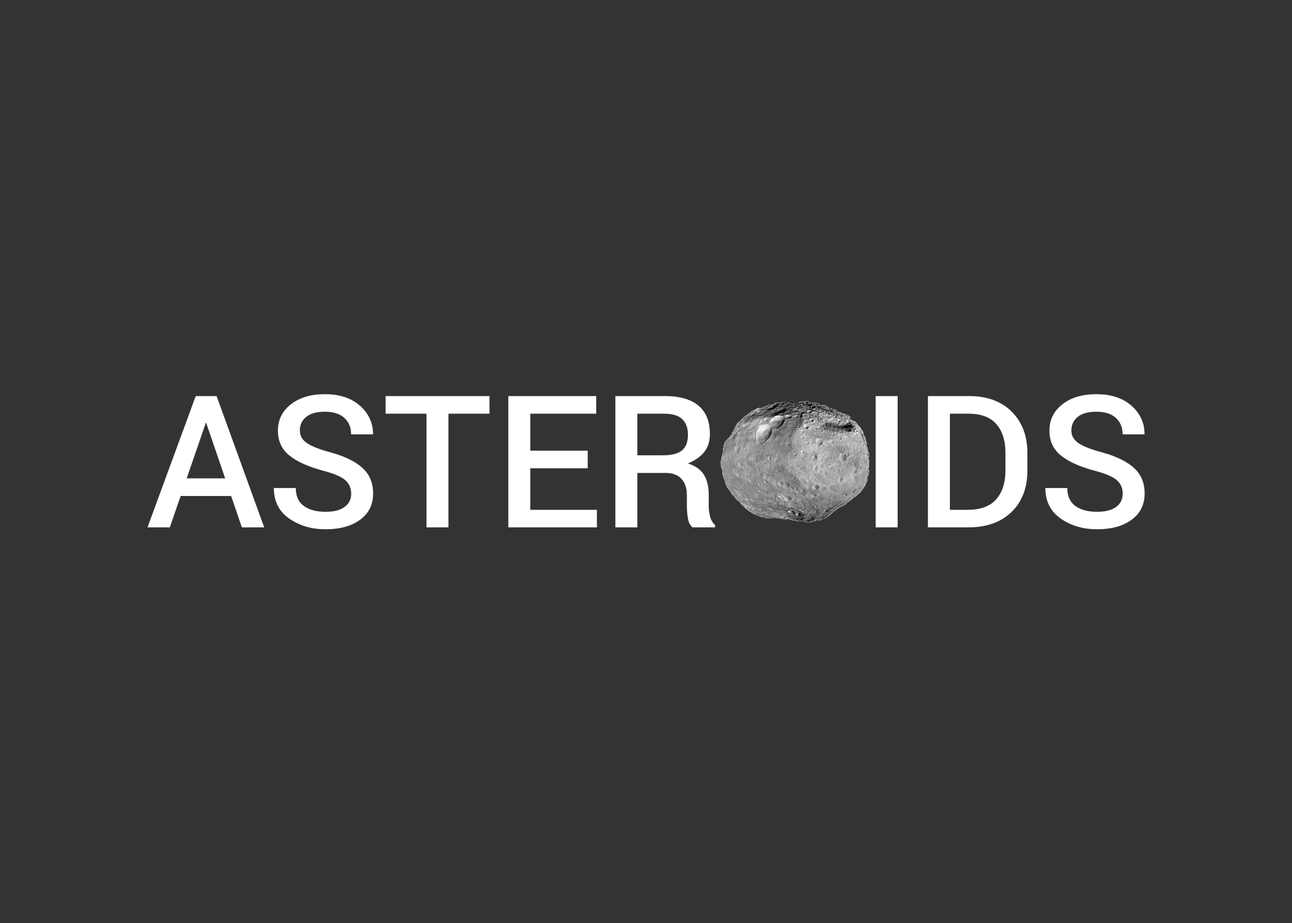
<style>
.page{position:relative;width:1292px;height:923px;background:#333333}
.page>*{position:absolute;margin:0}
.t1{font:184.6px "Roboto-Medium";color:#ffffff}
</style>
<div class="page">
<p class="t1" style="left:147px;top:394px;width:998px;height:136px">ASTER   IDS</p>
</div>
